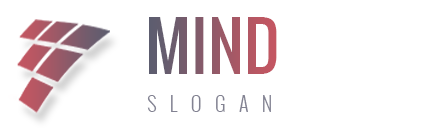
<style>
.page{position:relative;width:430px;height:130px;background:#ffffff}
.page>*{position:absolute;margin:0}
.t1{font:64px "Oswald-Regular"}
.t2{font:20px "Oswald-Light";letter-spacing:0.67em;color:#828292}
</style>
<div class="page">
<p class="t1" style="left:149px;top:17px;width:128px;height:57px">MIND</p>
<p class="t2" style="left:147px;top:95px;width:124px;height:17px">SLOGAN</p>
</div>
